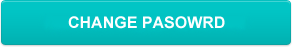
<style>
.page{position:relative;width:292px;height:47px}
.page>*{position:absolute;margin:0}
.t1{font:16px "Arial-BoldMT";color:#fefefe}
</style>
<div class="page">
<p class="t1" style="left:68px;top:16px;width:157px;height:13px">CHANGE PASOWRD</p>
</div>
